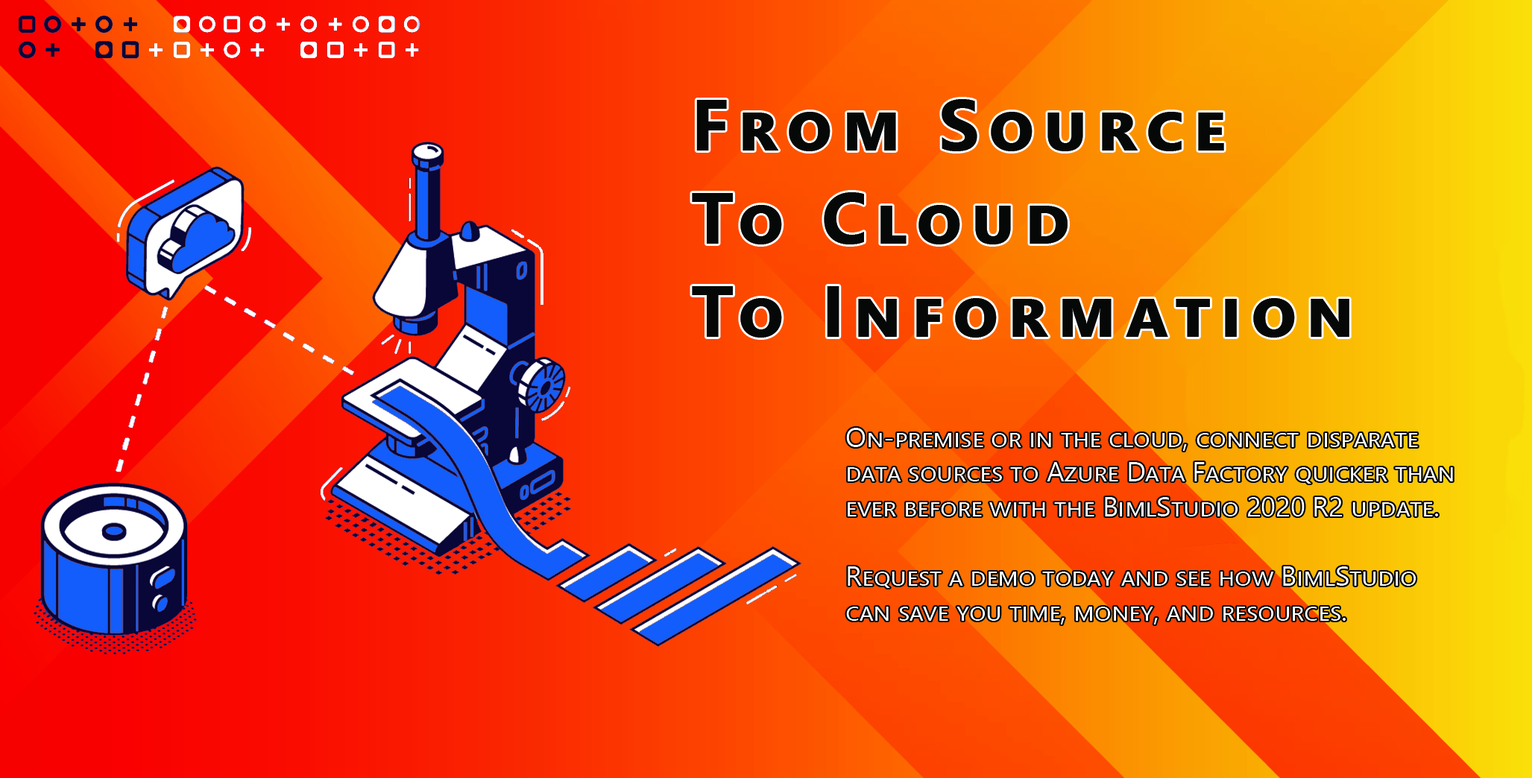
<style>
.page{position:relative;width:1532px;height:778px}
.page>*{position:absolute;margin:0}
.t1{font:72.2px "SegoeUI-Bold";letter-spacing:0.12em;color:#060808;font-variant:small-caps}
.t2{font:26.9px "SegoeUI";color:#ffffff;font-variant:small-caps}
</style>
<div class="page">
<p class="t1" style="left:692px;top:99px;width:657px;height:239px">From Source <br>To Cloud<br>To Information</p>
<p class="t2" style="left:846px;top:428px;width:607px;height:197px">On-premise or in the cloud, connect disparate <br>data sources to Azure Data Factory quicker than <br>ever before with the BimlStudio 2020 R2 update. <br><br>Request a demo today and see how BimlStudio <br>can save you time, money, and resources.</p>
</div>
